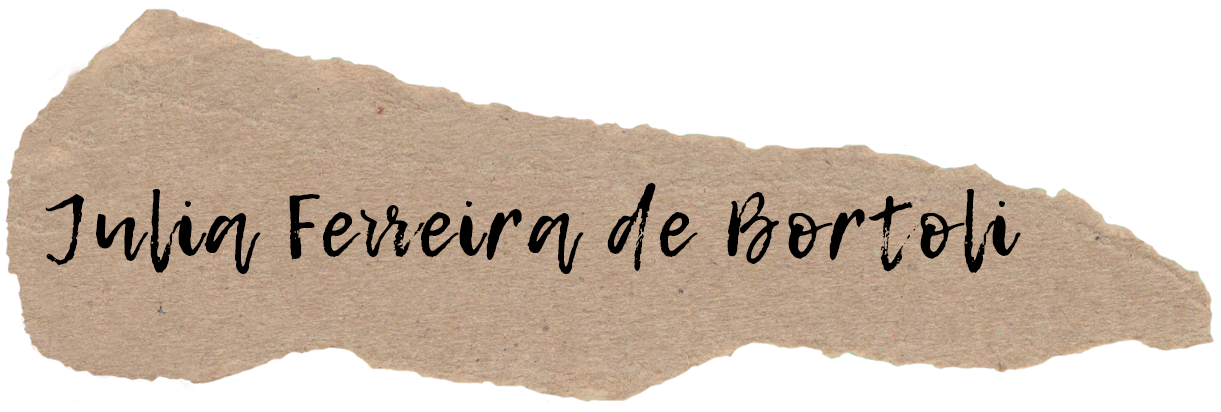
<style>
.page{position:relative;width:1221px;height:412px;background:#ffffff}
.page>*{position:absolute;margin:0}
.t1{font:87px "LemonTuesday";letter-spacing:0.05em;color:#000000}
</style>
<div class="page">
<p class="t1" style="left:45px;top:183px;width:976px;height:91px">Julia Ferreira de Bortoli</p>
</div>
